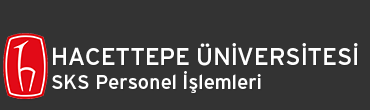
<style>
.page{position:relative;width:370px;height:110px;background:#333333}
.page>*{position:absolute;margin:0}
.t1{font:24px "Interstate";color:#ffffff}
.t2{font:20px "Interstate";color:#ffffff}
</style>
<div class="page">
<p class="t1" style="left:52px;top:43px;width:306px;height:50px">HACETTEPE ÜNİVERSİTESİ<br><span class="t2">SKS Personel İşlemleri</span></p>
</div>
